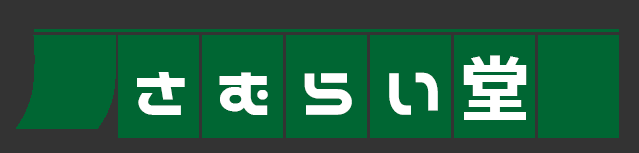
<style>
.page{position:relative;width:639px;height:153px;background:#006633}
.page>*{position:absolute;margin:0}
.t1{font:72px "NicoKaku";letter-spacing:0.025em;color:#ffffff}
</style>
<div class="page">
<p class="t1" style="left:463px;top:55px;width:64px;height:65px">堂</p>
<p class="t1" style="left:137px;top:72px;width:48px;height:43px">さ</p>
<p class="t1" style="left:219px;top:72px;width:49px;height:43px">む</p>
<p class="t1" style="left:304px;top:73px;width:48px;height:42px">ら</p>
<p class="t1" style="left:389px;top:72px;width:49px;height:43px">い</p>
</div>
